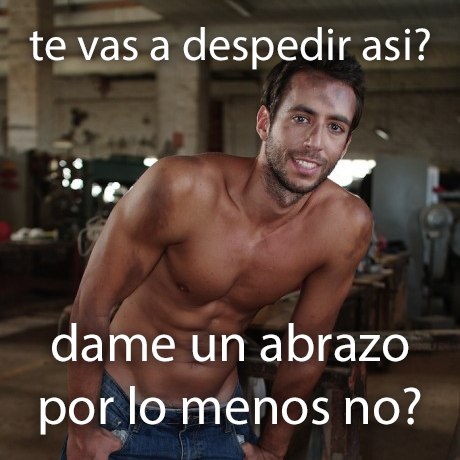
<style>
.page{position:relative;width:460px;height:460px}
.page>*{position:absolute;margin:0}
.t1{font:46.4px "MyriadPro-Regular";color:#ffffff}
.t2{font:53.5px "MyriadPro-Regular";color:#ffffff}
</style>
<div class="page">
<p class="t1" style="left:29px;top:27px;width:401px;height:43px">te vas a despedir asi?</p>
<p class="t2" style="left:40px;top:323px;width:381px;height:112px;text-align:center">dame un abrazo<br>por lo menos no?</p>
</div>
